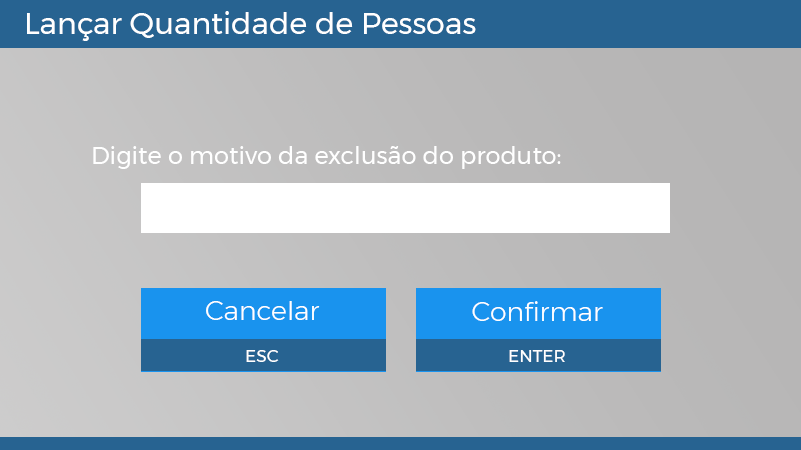
<style>
.page{position:relative;width:801px;height:450px}
.page>*{position:absolute;margin:0}
.t1{font:30px "Montserrat-Regular";color:#ffffff}
.t2{font:24px "Montserrat-Regular";color:#ffffff}
.t3{font:26.8px "Montserrat-Light";color:#ffffff}
.t4{font:16.8px "Montserrat-Regular";color:#ffffff}
</style>
<div class="page">
<p class="t1" style="left:27px;top:11px;width:449px;height:30px">Lançar Quantidade de Pessoas</p>
<p class="t2" style="left:93px;top:146px;width:468px;height:23px">Digite o motivo da exclusão do produto:</p>
<p class="t3" style="left:206px;top:301px;width:114px;height:19px">Cancelar</p>
<p class="t3" style="left:472px;top:301px;width:131px;height:20px">Confirmar</p>
<p class="t4" style="left:246px;top:350px;width:33px;height:12px">ESC</p>
<p class="t4" style="left:509px;top:350px;width:56px;height:12px">ENTER</p>
</div>
